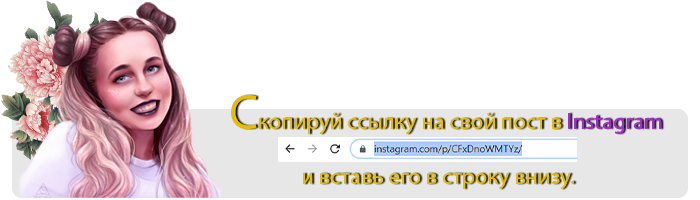
<style>
.page{position:relative;width:700px;height:200px;background:#ffffff}
.page>*{position:absolute;margin:0}
.t1{font:22.8px "MyriadPro-Regular";color:#e7be00}
.t2{font:50px "MyriadPro-Regular";color:#e7be00}
.t3{font:22.8px "MyriadPro-Regular";color:#aa28d5}
</style>
<div class="page">
<p class="t1" style="left:231px;top:95px;width:431px;height:95px"><span class="t2">С</span>копируй ссылку на свой пост в <span class="t3">Instagram<br></span> <br>               и вставь его в строку внизу.</p>
</div>
